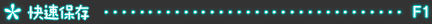
<style>
.page{position:relative;width:432px;height:24px;background:#333333}
.page>*{position:absolute;margin:0}
.t1{font:18px "¢è?";color:#ffffff}
</style>
<div class="page">
<p class="t1" style="left:28px;top:4px;width:61px;height:16px">快速保存</p>
</div>
